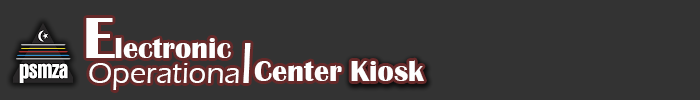
<style>
.page{position:relative;width:700px;height:100px;background:#333333}
.page>*{position:absolute;margin:0}
.t1{font:30px "BritannicBold";color:#fefefe}
.t2{font:60px "BritannicBold";color:#fefefe}
.t3{font:30px "ErasITC-Medium";color:#fefefe}
.t4{font:60px "ErasITC-Medium";color:#fefefe}
</style>
<div class="page">
<p class="t1" style="left:86px;top:18px;width:145px;height:40px"><span class="t2">E</span>lectronic</p>
<p class="t3" style="left:89px;top:43px;width:162px;height:47px">Operationa<span class="t4">l</span></p>
<p class="t1" style="left:254px;top:61px;width:88px;height:20px">Center</p>
<p class="t1" style="left:351px;top:60px;width:73px;height:21px">Kiosk</p>
</div>
